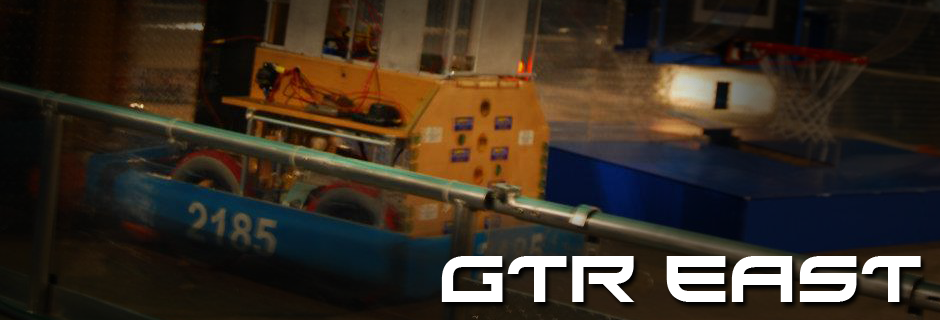
<style>
.page{position:relative;width:940px;height:320px}
.page>*{position:absolute;margin:0}
.t1{font:65.5px "Xirod-Regular";color:#ffffff}
</style>
<div class="page">
<p class="t1" style="left:441px;top:256px;width:480px;height:46px">GTR East</p>
</div>
